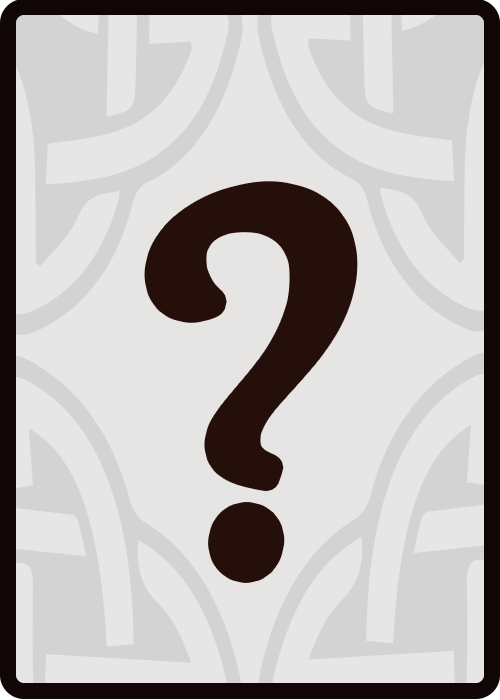
<style>
.page{position:relative;width:500px;height:700px;background:#e6e6e6}
.page>*{position:absolute;margin:0}
.t1{font:641.1px "Gabriola";color:#240f0b}
</style>
<div class="page">
<p class="t1" style="left:157px;top:194px;width:188px;height:376px;rotate:-2deg">?</p>
</div>
